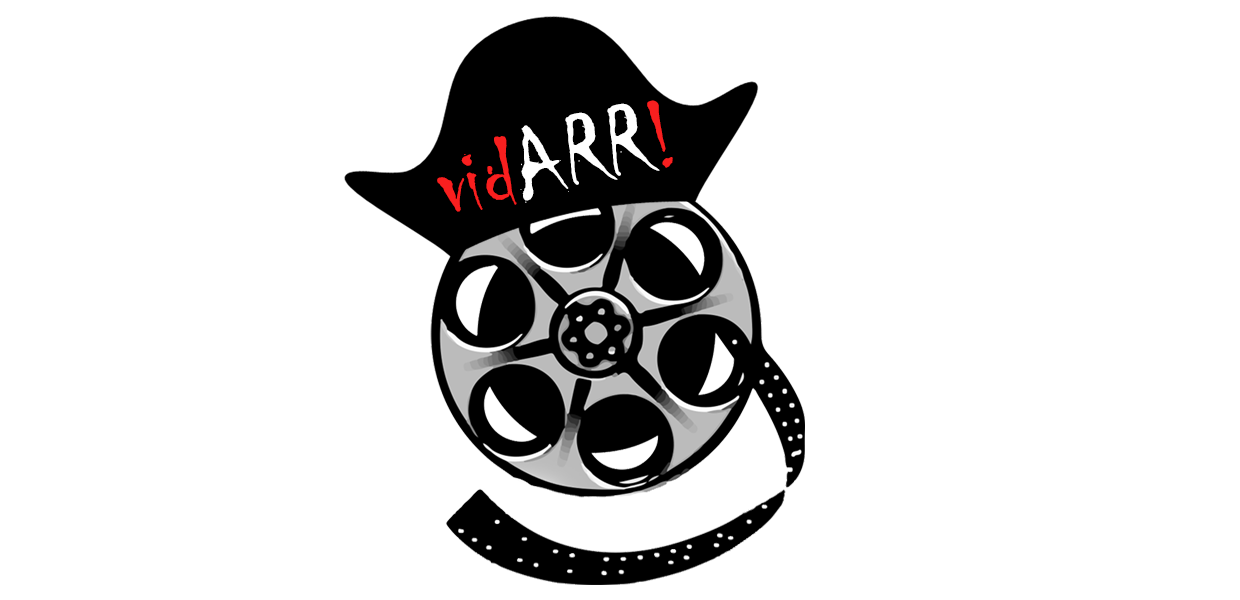
<style>
.page{position:relative;width:1240px;height:600px;background:#ffffff}
.page>*{position:absolute;margin:0}
.t1{font:100.9px "Chiller-Regular";color:#f91f1f}
.t2{font:100.9px "Chiller-Regular";color:#ffffff}
</style>
<div class="page">
<p class="t1" style="left:437px;top:100px;width:236px;height:112px;rotate:-13deg">vid<span class="t2">ARR</span>!</p>
</div>
